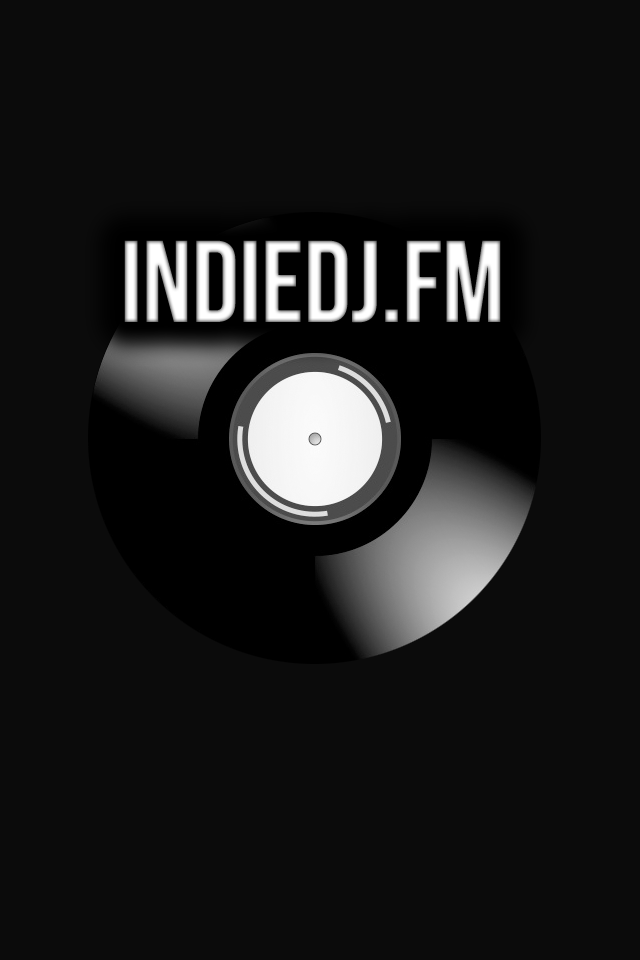
<style>
.page{position:relative;width:640px;height:960px;background:#0b0b0b}
.page>*{position:absolute;margin:0}
.t1{font:116px "BebasNeue"}
</style>
<div class="page">
<p class="t1" style="left:124px;top:240px;width:377px;height:83px">INDIEdj.fm</p>
</div>
